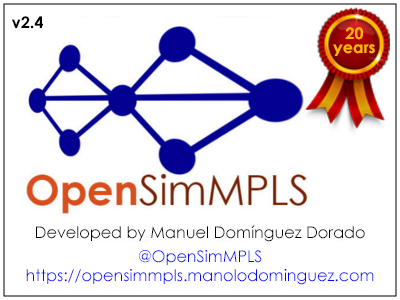
<style>
.page{position:relative;width:400px;height:300px;background:#ffffff}
.page>*{position:absolute;margin:0}
.t1{font:16px "CenturyGothic-Bold";color:#000000}
.t2{font:16px/14px "CenturyGothic-Bold";color:#ffb607}
.t3{font:16px "CenturyGothic";color:#000000}
.t4{font:16px "CenturyGothic";color:#000cff}
</style>
<div class="page">
<p class="t1" style="left:12px;top:16px;width:31px;height:13px">v2.4</p>
<p class="t2" style="left:333px;top:27px;width:42px;height:29px;text-align:center">20<br>years</p>
<p class="t3" style="left:36px;top:225px;width:329px;height:17px">Developed by Manuel Domínguez Dorado</p>
<p class="t4" style="left:139px;top:250px;width:123px;height:15px">@OpenSimMPLS</p>
<p class="t4" style="left:26px;top:269px;width:348px;height:16px">https://opensimmpls.manolodominguez.com</p>
</div>
